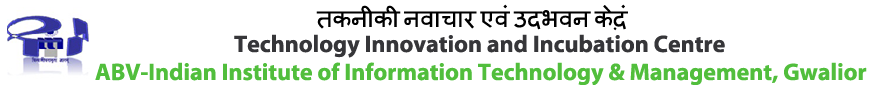
<style>
.page{position:relative;width:891px;height:85px;background:#ffffff}
.page>*{position:absolute;margin:0}
.t1{font:24px "Mangal";color:#000000}
.t2{font:24px "MyriadPro-Bold";color:#363639}
.t3{font:24px "MyriadPro-Bold";color:#51be3c}
</style>
<div class="page">
<p class="t1" style="left:316px;top:4px;width:312px;height:27px">तकनीकी नवाचार एवं उदभवन केद़ं</p>
<p class="t2" style="left:234px;top:34px;width:491px;height:24px">Technology Innovation and Incubation Centre</p>
<p class="t3" style="left:95px;top:62px;width:772px;height:24px">ABV-Indian Institute of Information Technology &amp; Management, Gwalior</p>
</div>
